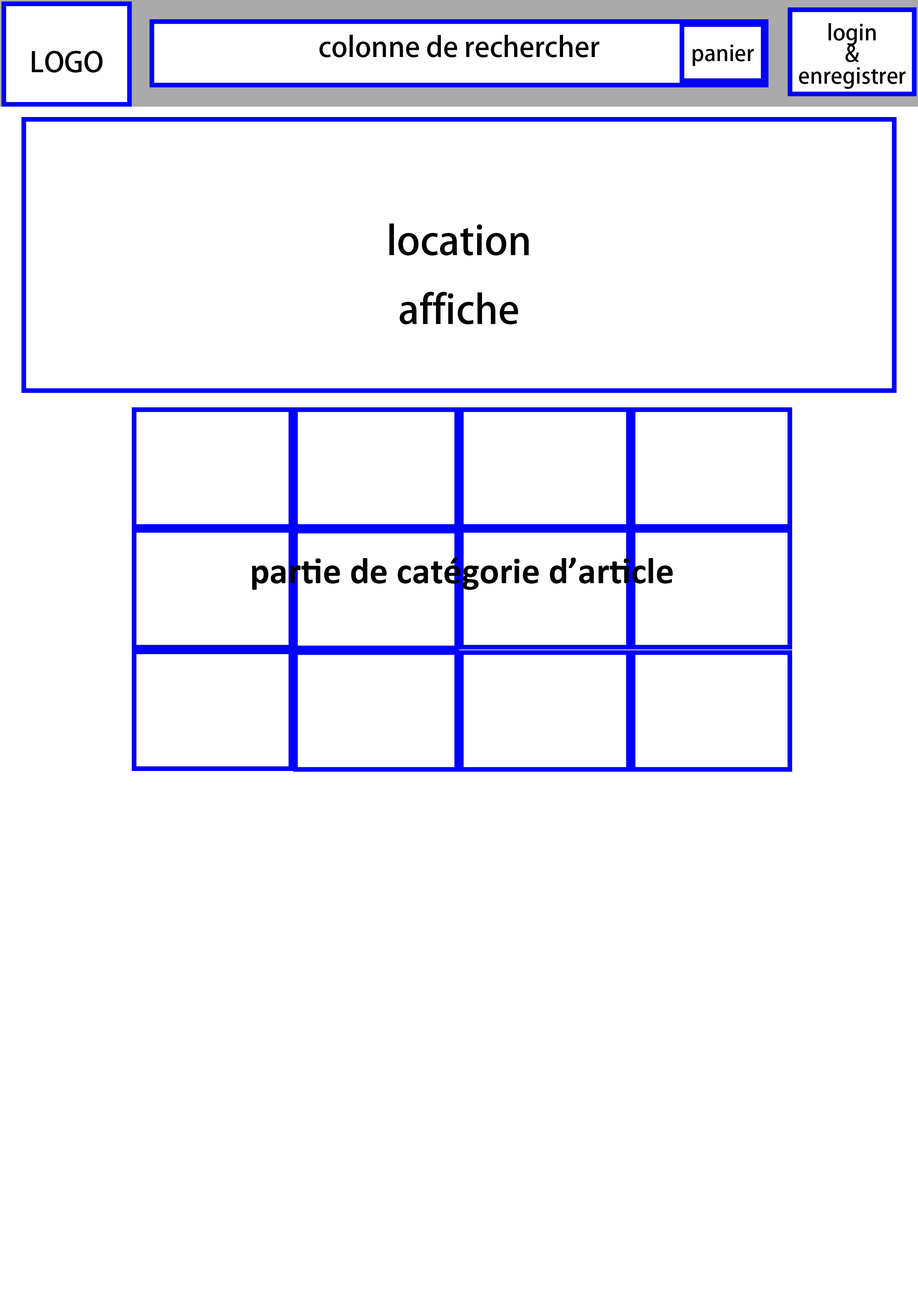
<style>
.page{position:relative;width:918px;height:1299px;background:#ffffff}
.page>*{position:absolute;margin:0}
.t1{font:21.6px/21.6px "AdobeHeitiStd-Regular";color:#000000}
.t2{font:27.8px "AdobeHeitiStd-Regular";color:#000000}
.t3{font:21.6px "AdobeHeitiStd-Regular";color:#000000}
.t4{font:39.5px "AdobeHeitiStd-Regular";color:#000000}
.t5{font:37px "Calibri-Bold";color:#000000}
</style>
<div class="page">
<p class="t1" style="left:799px;top:23px;width:107px;height:66px;text-align:center">login<br>&amp;<br>enregistrer</p>
<p class="t2" style="left:320px;top:34px;width:279px;height:23px">colonne de rechercher</p>
<p class="t2" style="left:32px;top:51px;width:71px;height:22px">LOGO</p>
<p class="t3" style="left:693px;top:44px;width:61px;height:22px">panier</p>
<p class="t4" style="left:389px;top:223px;width:140px;height:102px;text-align:center">location<br>affiche</p>
<p class="t5" style="left:252px;top:558px;width:421px;height:32px">partie de catégorie d’article</p>
</div>
